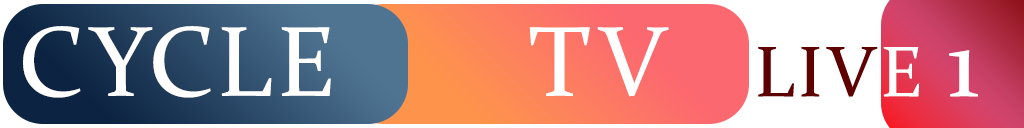
<style>
.page{position:relative;width:1024px;height:128px;background:#ffffff}
.page>*{position:absolute;margin:0}
.t1{font:100px "Constantia";letter-spacing:0.05em;color:#ffffff}
.t2{font:72px "Constantia";letter-spacing:0.05em;color:#5e0000}
.t3{font:72px "Constantia";letter-spacing:0.05em;color:#fefefe}
</style>
<div class="page">
<p class="t1" style="left:23px;top:26px;width:646px;height:72px">CYCLE       TV</p>
<p class="t2" style="left:758px;top:47px;width:220px;height:50px">LIV<span class="t3">E </span><span class="t1">1</span></p>
</div>
